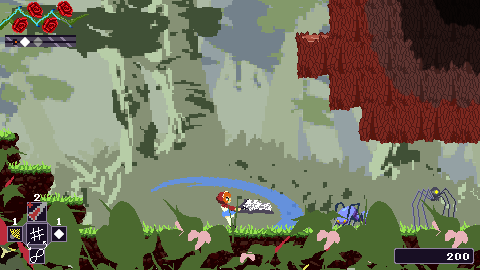
<style>
.page{position:relative;width:480px;height:270px;background:#869175}
.page>*{position:absolute;margin:0}
.t1{font:16px "8-Bit-Madness";color:#ffffff}
</style>
<div class="page">
<p class="t1" style="left:34px;top:194px;width:6px;height:7px">2</p>
<p class="t1" style="left:13px;top:218px;width:4px;height:7px">1</p>
<p class="t1" style="left:57px;top:218px;width:4px;height:7px">1</p>
</div>
